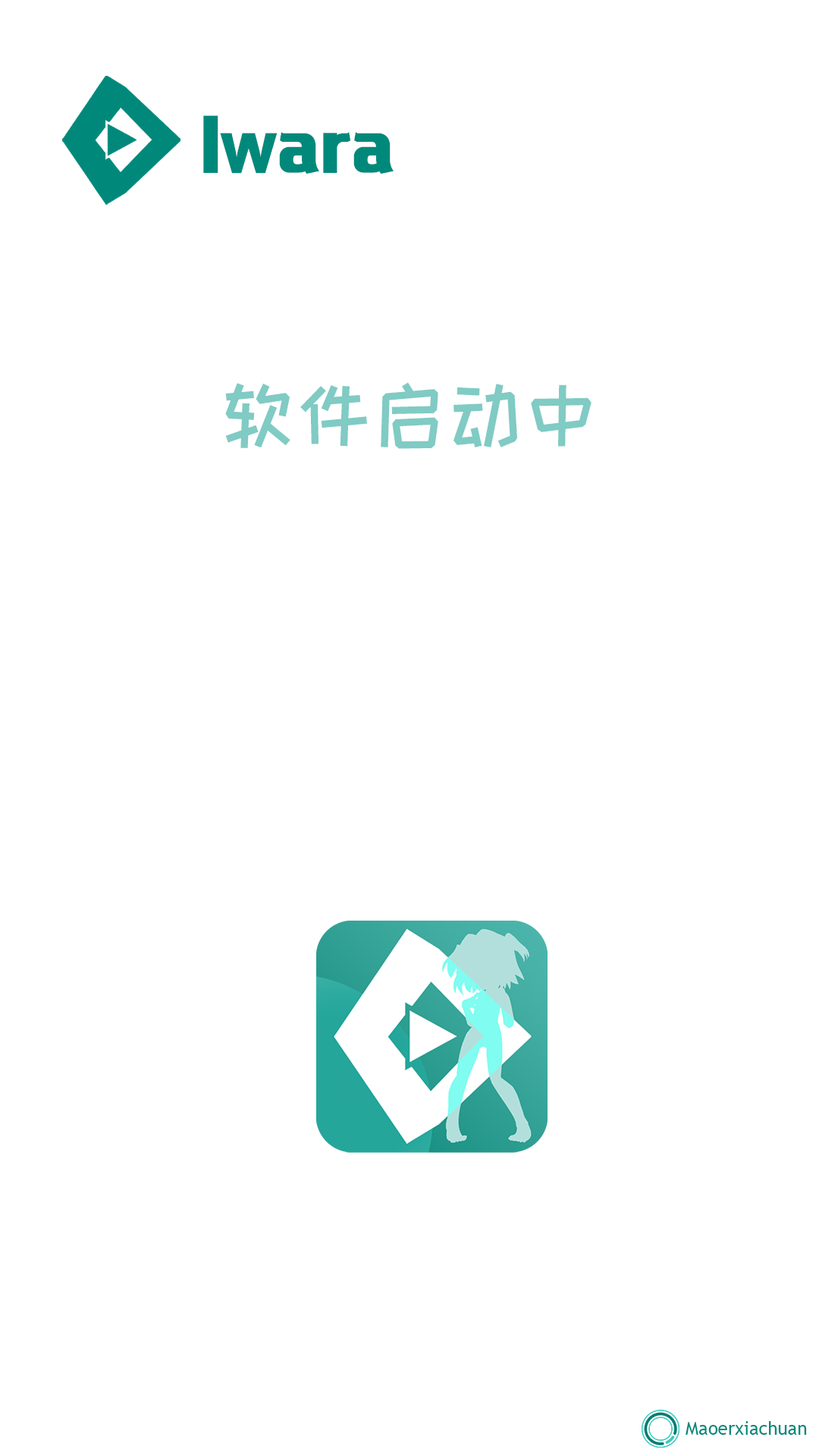
<style>
.page{position:relative;width:819px;height:1456px;background:#ffffff}
.page>*{position:absolute;margin:0}
.t1{font:65.7px "BenmoJinhei";color:#00897b}
.t2{font:75.8px "HappyZcool-2016";color:#80cbc4}
.t3{font:18.2px "TrebuchetMS";color:#00897b}
</style>
<div class="page">
<p class="t1" style="left:203px;top:115px;width:191px;height:59px">Iwara</p>
<p class="t2" style="left:225px;top:382px;width:366px;height:67px">软件启动中</p>
<p class="t3" style="left:686px;top:1421px;width:121px;height:14px">Maoerxiachuan</p>
</div>
